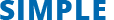
<style>
.page{position:relative;width:114px;height:20px;background:#ffffff}
.page>*{position:absolute;margin:0}
.t1{font:28px "OpenSans-Extrabold";letter-spacing:0.04em;color:#0069b0;text-transform:uppercase}
</style>
<div class="page">
<p class="t1" style="left:0px;top:0px;width:106px;height:20px">simple</p>
</div>
